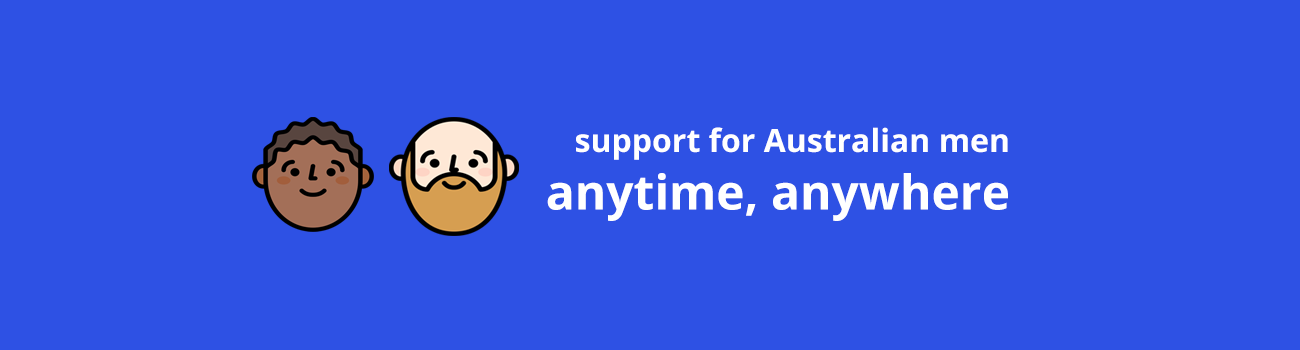
<style>
.page{position:relative;width:1300px;height:350px;background:#2e51e4}
.page>*{position:absolute;margin:0}
.t1{font:32px "OpenSans-Bold";color:#ffffff}
.t2{font:48px "OpenSans-Bold";color:#ffffff}
</style>
<div class="page">
<p class="t1" style="left:547px;top:127px;width:461px;height:94px">support for Australian men<span class="t2"> <br>anytime, anywhere</span></p>
</div>
